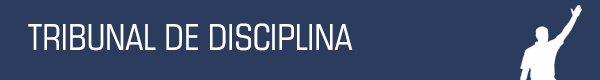
<style>
.page{position:relative;width:600px;height:80px;background:#2b3c5d}
.page>*{position:absolute;margin:0}
.t1{font:36px "Square721BT-RomanCondensed";color:#ffffff;text-transform:uppercase}
</style>
<div class="page">
<p class="t1" style="left:28px;top:23px;width:325px;height:28px">Tribunal de Disciplina</p>
</div>
